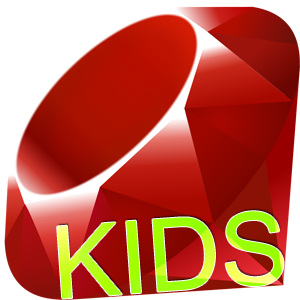
<style>
.page{position:relative;width:300px;height:300px;background:#ffffff}
.page>*{position:absolute;margin:0}
.t1{font:100.7px "ArialMT"}
</style>
<div class="page">
<p class="t1" style="left:57px;top:211px;width:227px;height:88px;rotate:-4deg">KIDS</p>
</div>
